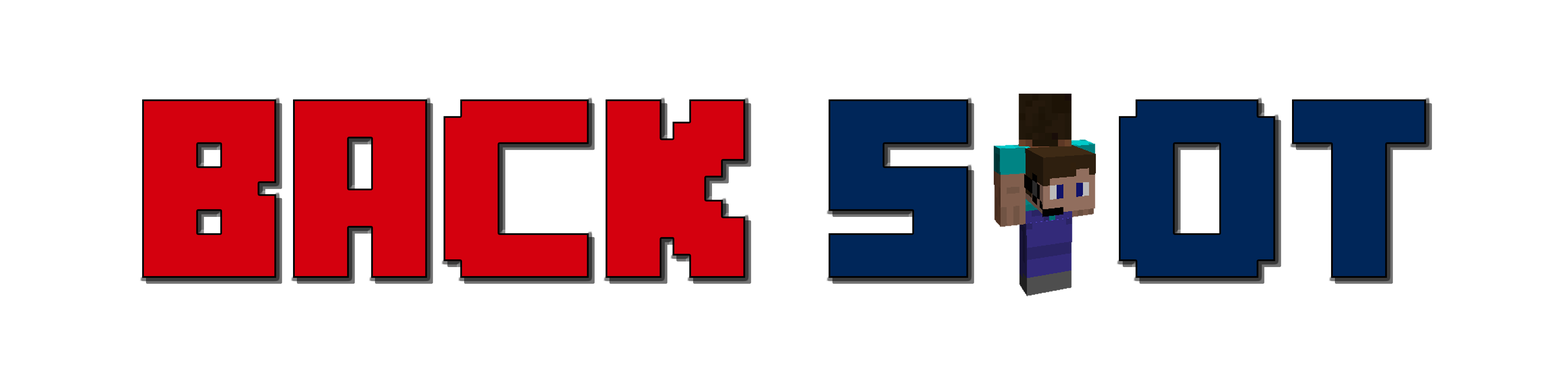
<style>
.page{position:relative;width:1568px;height:376px;background:#ffffff}
.page>*{position:absolute;margin:0}
.t1{font:178.6px "MineCrafter-3";color:#002659}
.t2{font:178.6px "MineCrafter-3";color:#d4000e}
</style>
<div class="page">
<p class="t1" style="left:142px;top:99px;width:1284px;height:179px"><span class="t2">Back</span> S  ot</p>
</div>
